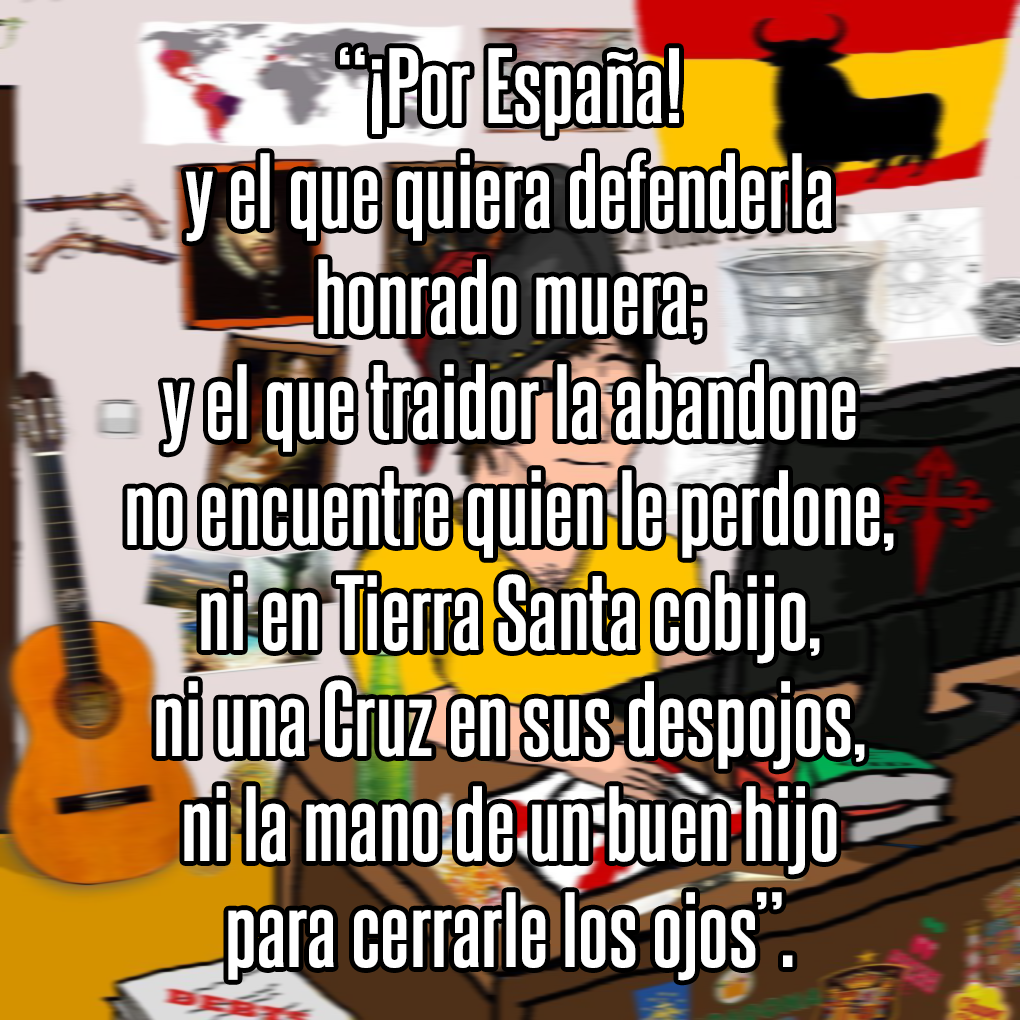
<style>
.page{position:relative;width:1020px;height:1020px}
.page>*{position:absolute;margin:0}
.t1{font:90.8px "SteelfishRg-Bold";color:#ffffff;scale:1.15 1}
</style>
<div class="page">
<p class="t1" style="left:127px;top:47px;width:767px;height:934px;text-align:center">“¡Por España!<br>y el que quiera defenderla<br>honrado muera;<br>y el que traidor la abandone<br>no encuentre quien le perdone,<br>ni en Tierra Santa cobijo,<br>ni una Cruz en sus despojos,<br>ni la mano de un buen hijo<br>para cerrarle los ojos”.</p>
</div>
